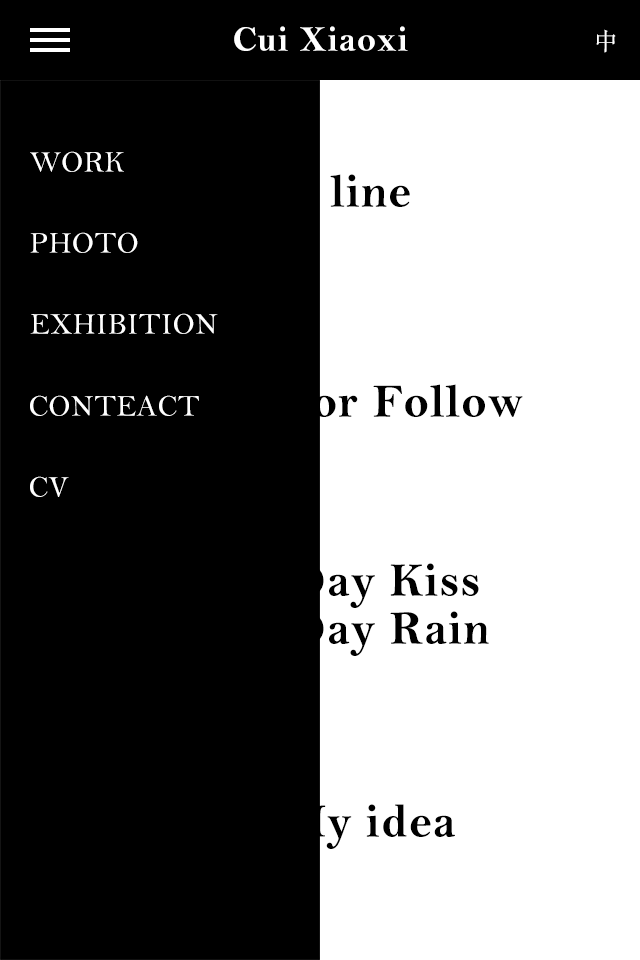
<style>
.page{position:relative;width:640px;height:960px;background:#000000}
.page>*{position:absolute;margin:0}
.t1{font:36px "BellMTBold";letter-spacing:0.02em;color:#ffffff}
.t2{font:36px "BellMTBold";letter-spacing:0.02em;color:#ffffff;text-transform:uppercase}
.t3{font:24px "STSongti-SC-Regular";letter-spacing:0.02em;color:#ffffff;text-transform:uppercase}
.t4{font:30px "BellMT";letter-spacing:0.02em;color:#ffffff;text-transform:uppercase}
.t5{font:48px "BellMTBold";letter-spacing:0.02em;color:#000000}
.t6{font:48px/48px "BellMTBold";letter-spacing:0.02em;color:#000000}
</style>
<div class="page">
<p class="t1" style="left:234px;top:26px;width:174px;height:25px"><span class="t2">c</span>ui <span class="t2">x</span>iaoxi</p>
<p class="t3" style="left:596px;top:29px;width:20px;height:24px">中</p>
<p class="t4" style="left:30px;top:151px;width:94px;height:21px">work</p>
<p class="t5" style="left:231px;top:174px;width:179px;height:33px">Red line</p>
<p class="t4" style="left:30px;top:232px;width:108px;height:21px">photo</p>
<p class="t4" style="left:30px;top:313px;width:188px;height:21px">exhibition</p>
<p class="t5" style="left:117px;top:384px;width:406px;height:33px">Follow For Follow</p>
<p class="t4" style="left:30px;top:395px;width:169px;height:21px">conteact</p>
<p class="t4" style="left:30px;top:476px;width:39px;height:21px">cv</p>
<p class="t6" style="left:149px;top:563px;width:340px;height:93px">Seven Day Kiss <br>Seven Day Rain</p>
<p class="t5" style="left:184px;top:804px;width:271px;height:45px">Not My idea</p>
</div>
